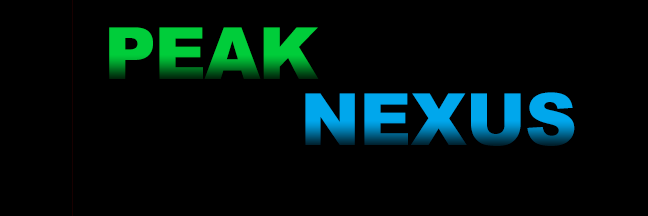
<style>
.page{position:relative;width:648px;height:216px;background:#000000}
.page>*{position:absolute;margin:0}
.t1{font:72px "Arial-Black";letter-spacing:-0.025em;color:#00cd3a;text-transform:uppercase}
.t2{font:72px "Arial-Black";letter-spacing:-0.01em;color:#00a7ec;text-transform:uppercase}
</style>
<div class="page">
<p class="t1" style="left:109px;top:27px;width:210px;height:52px">PEAK</p>
<p class="t2" style="left:305px;top:92px;width:270px;height:54px">NEXUS</p>
</div>
